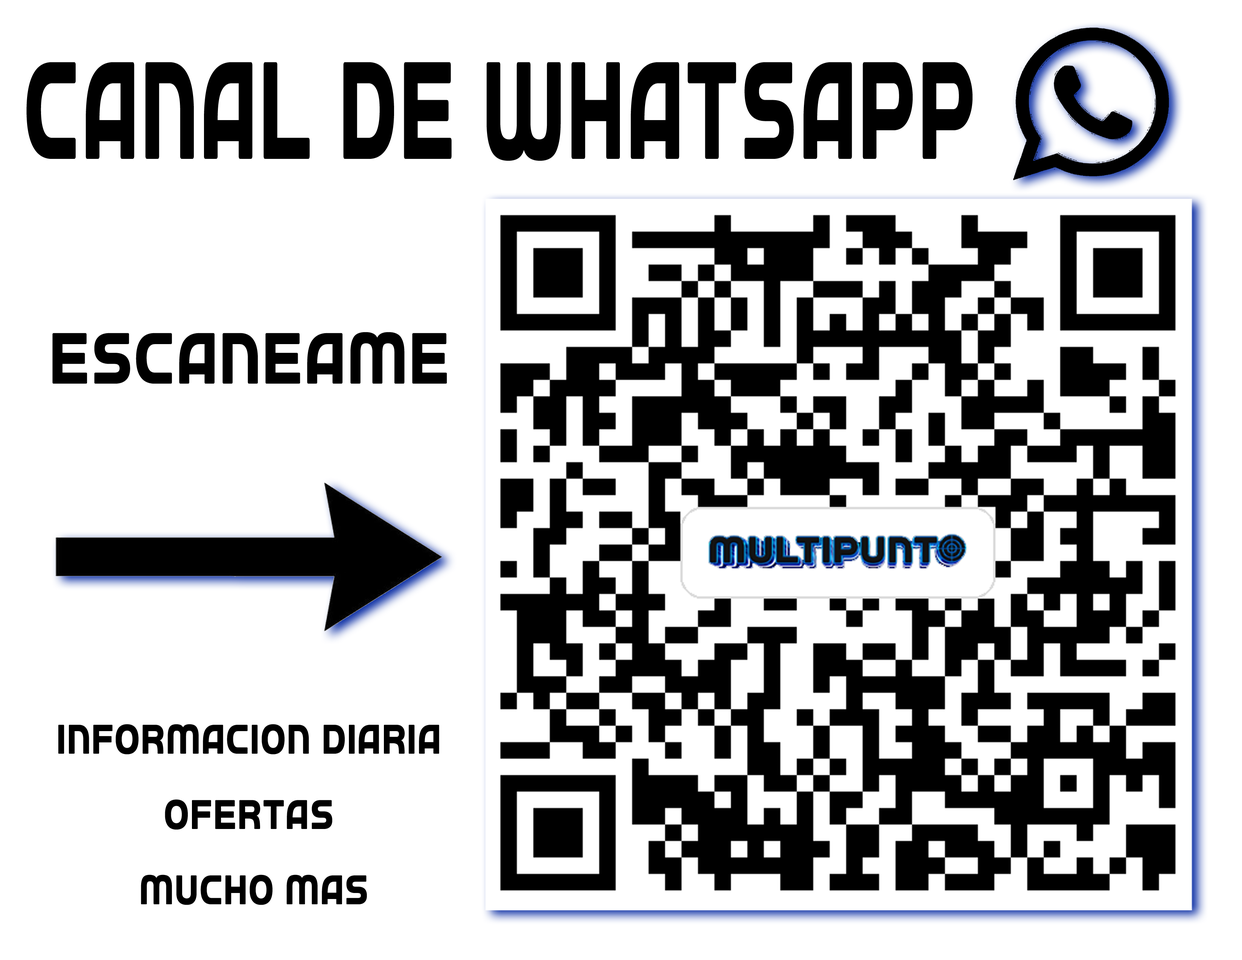
<style>
.page{position:relative;width:1242px;height:960px;background:#ffffff}
.page>*{position:absolute;margin:0}
.t1{font:131.3px "aAutobusOmnibus";color:#000000;scale:0.57 1}
.t2{font:68.6px "aAutobusOmnibus";color:#000000;scale:0.8 1}
.t3{font:39.2px/75.3px "aAutobusOmnibus";color:#000000;scale:0.8 1}
</style>
<div class="page">
<p class="t1" style="left:26px;top:62px;width:947px;height:99px">canal de whatsapp</p>
<p class="t2" style="left:52px;top:332px;width:395px;height:52px">escaneame</p>
<p class="t3" style="left:58px;top:724px;width:381px;height:181px;text-align:center">Informacion diaria<br>ofertas<br> mucho mas</p>
</div>
